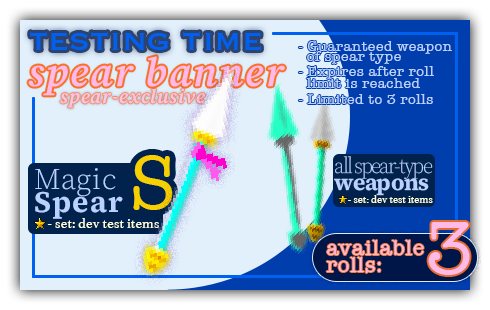
<style>
.page{position:relative;width:490px;height:310px;background:#e2f0fc}
.page>*{position:absolute;margin:0}
.t1{font:38.2px "Copperplate";color:#0060f0}
.t2{font:14.2px/10px "AmericanTypewriter";letter-spacing:0.04em;color:#bad2ff}
.t3{font:40.5px "SourceSerif4Italic-SmTextSemiboldItalic";letter-spacing:0.04em;color:#ffbae8}
.t4{font:14.2px/12px "AmericanTypewriter";letter-spacing:0.04em;color:#bad2ff}
.t5{font:19.6px "SourceSerif4Italic-SmTextSemiboldItalic";letter-spacing:0.04em;color:#ffbae8}
.t6{font:14.2px "AmericanTypewriter";letter-spacing:0.04em;color:#bad2ff}
.t7{font:76.7px "AmericanTypewriter";letter-spacing:-0.08em;color:#f6d000}
.t8{font:22.4px/17.2px "SourceSerif4Roman-DisplayLight";letter-spacing:-0.08em;color:#bad2ff}
.t9{font:22.4px/17.2px "SourceSerif4Roman_669.000wght_14.000opsz";letter-spacing:-0.02em;color:#bad2ff}
.t10{font:29.9px/22.8px "SourceSerif4Roman-Light";letter-spacing:0.02em;color:#bad2ff}
.t11{font:29.9px/22.8px "SourceSerif4Roman_669.000wght_14.000opsz";letter-spacing:0.04em;color:#bad2ff}
.t12{font:10.7px "Athelas-Regular";color:#ffffdf}
.t13{font:14.2px "Athelas-Regular";color:#ffffdf}
.t14{font:75.8px "AmericanTypewriter";letter-spacing:0.04em;color:#ffbae8}
.t15{font:21.4px/16.3px "AmericanTypewriter";letter-spacing:0.04em;color:#ffbad9}
</style>
<div class="page">
<p class="t1" style="left:30px;top:32px;width:231px;height:18px">testing time</p>
<p class="t2" style="left:298px;top:41px;width:154px;height:23px">- Guaranteed weapon<br>  of spear type</p>
<p class="t3" style="left:28px;top:56px;width:257px;height:40px">spear banner</p>
<p class="t4" style="left:298px;top:66px;width:136px;height:22px">- Expires after roll<br>  limit is reached</p>
<p class="t5" style="left:60px;top:88px;width:145px;height:20px;opacity:0.8">spear-exclusive</p>
<p class="t6" style="left:298px;top:94px;width:135px;height:10px">- Limited to 3 rolls</p>
<p class="t7" style="left:133px;top:155px;width:40px;height:55px">S</p>
<p class="t8" style="left:334px;top:156px;width:99px;height:40px">all spear-type<br><span class="t9">weapons</span></p>
<p class="t10" style="left:35px;top:168px;width:88px;height:51px">Magic<br><span class="t11">Spear</span></p>
<p class="t12" style="left:348px;top:195px;width:85px;height:8px">- set: dev test items</p>
<p class="t13" style="left:47px;top:218px;width:112px;height:10px">- set: dev test items</p>
<p class="t14" style="left:428px;top:222px;width:42px;height:53px">3</p>
<p class="t15" style="left:326px;top:240px;width:98px;height:33px">available<br>rolls:</p>
</div>
